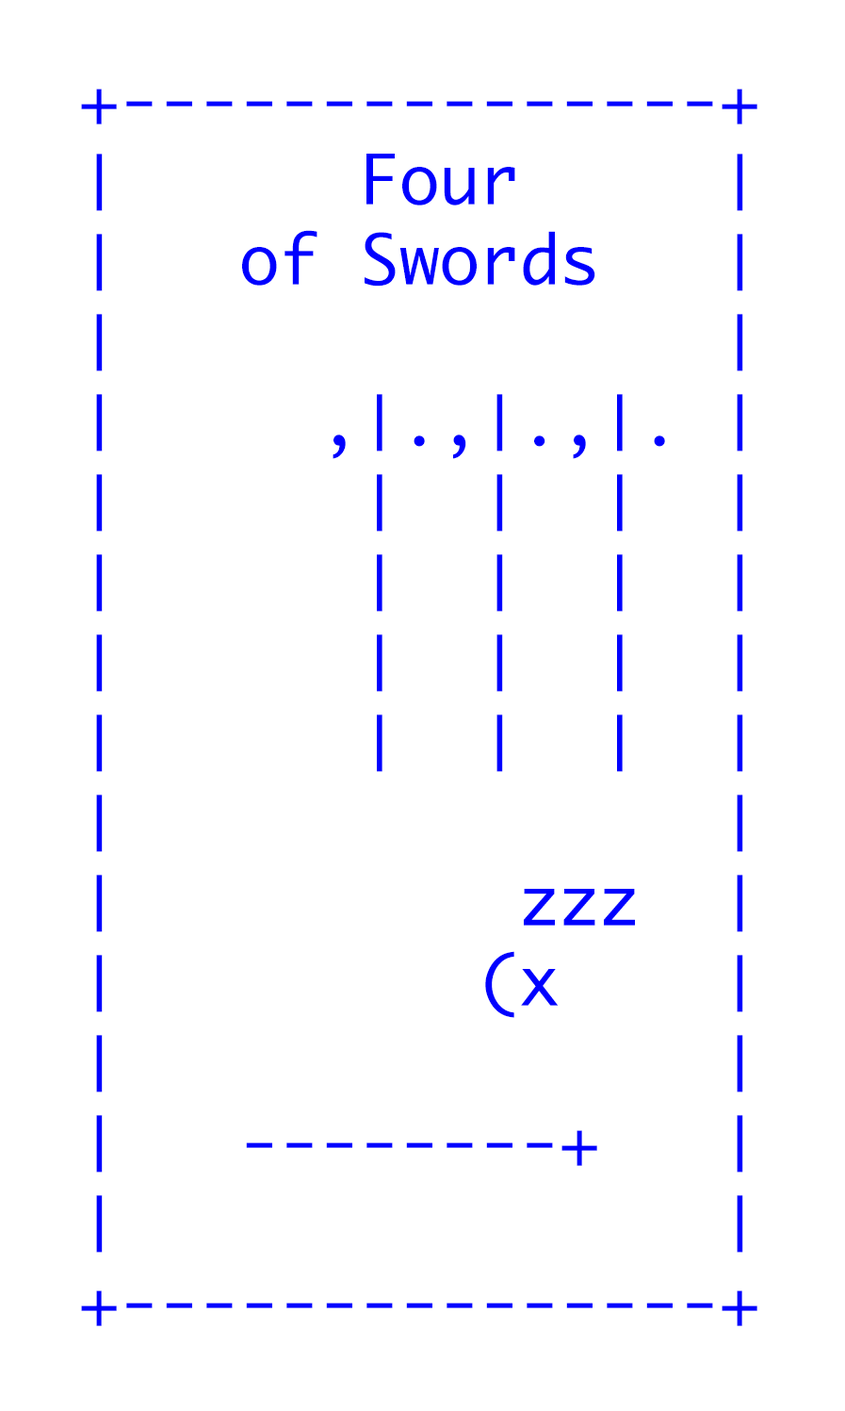
<style>
.page{position:relative;width:845px;height:1411px;background:#ffffff}
.page>*{position:absolute;margin:0}
.t1{font:66.7px "Monaco";color:#0000ff}
</style>
<div class="page">
<p class="t1" style="left:81px;top:89px;width:677px;height:1237px">+---------------+<br>│      Four     │<br>│   of Swords   │<br>│               │<br>│     ,│.,│.,│. │<br>│      │  │  │  │<br>│      │  │  │  │<br>│      │  │  │  │<br>│      │  │  │  │<br>│               │<br>│          zzz  │ <br>│         (x    │ <br>│               │<br>│   --------+   │<br>│               │<br>+---------------+</p>
</div>
